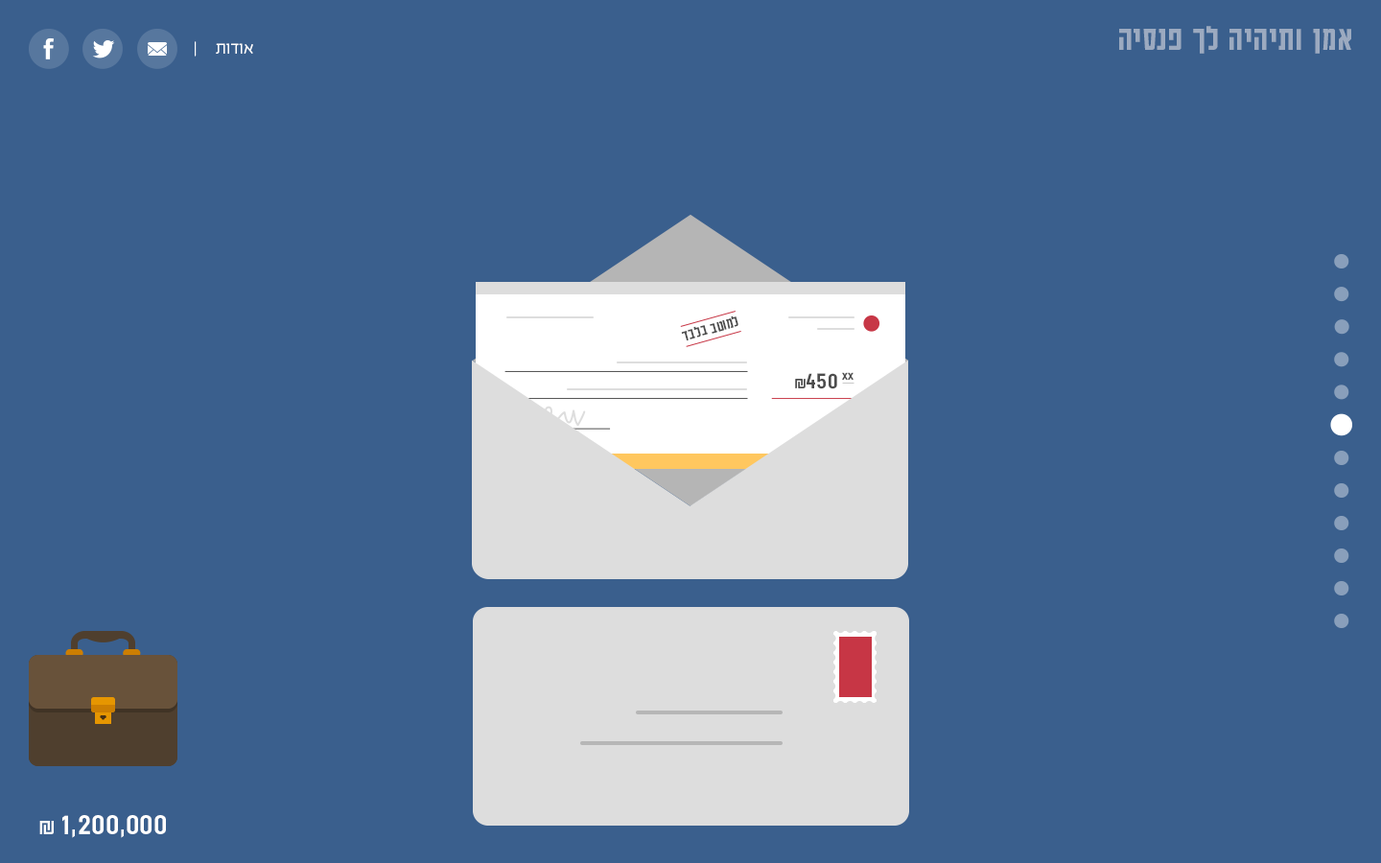
<style>
.page{position:relative;width:1381px;height:863px;background:#3a5f8d}
.page>*{position:absolute;margin:0}
.t1{font:37.8px "AdumaFOT-Medium";color:#9caac0}
.t2{font:19.2px "EzerBlock_OE-Light";color:#ffffff}
.t3{font:17px "AdumaFOT-Regular";color:#4d4d4d}
.t4{font:26.5px "AdumaFOT-Regular";color:#4d4d4d}
.t5{font:17.7px "AdumaFOT-Regular";color:#4d4d4d}
.t6{font:26.5px "AdumaFOT-Regular";color:#4d4d4d;text-decoration:underline}
.t7{font:33.6px "AdumaFOT-Regular";color:#ffffff}
.t8{font:24px "AdumaFOT-Regular";color:#ffffff}
</style>
<div class="page">
<p class="t1" style="left:1119px;top:26px;width:233px;height:28px">אמן ותיהיה לך פנסיה</p>
<p class="t2" style="left:195px;top:41px;width:58px;height:16px">אודות     |</p>
<p class="t3" style="left:681px;top:316px;width:58px;height:25px">למוטב בלבד</p>
<p class="t4" style="left:795px;top:372px;width:60px;height:17px"><span class="t5">₪</span>450 <span class="t6">xx</span></p>
<p class="t7" style="left:39px;top:815px;width:127px;height:23px">1,200,000<span class="t8"> ₪</span></p>
</div>
